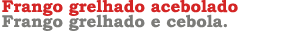
<style>
.page{position:relative;width:300px;height:50px;background:#ffffff}
.page>*{position:absolute;margin:0}
.t1{font:17px "BookmanOldStyle-Bold";color:#d42525}
.t2{font:17px "BookmanOldStyle-Bold";color:#7c7c79}
</style>
<div class="page">
<p class="t1" style="left:2px;top:0px;width:236px;height:16px">Frango grelhado acebolado</p>
<p class="t2" style="left:2px;top:14px;width:225px;height:17px">Frango grelhado e cebola.</p>
</div>
